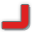
<style>
.page{position:relative;width:32px;height:32px;background:#ffffff}
.page>*{position:absolute;margin:0}
.t1{font:31.2px "TerminatorRealNFI";color:#df2121;font-weight:bold}
</style>
<div class="page">
<p class="t1" style="left:2px;top:5px;width:27px;height:24px">J</p>
</div>
